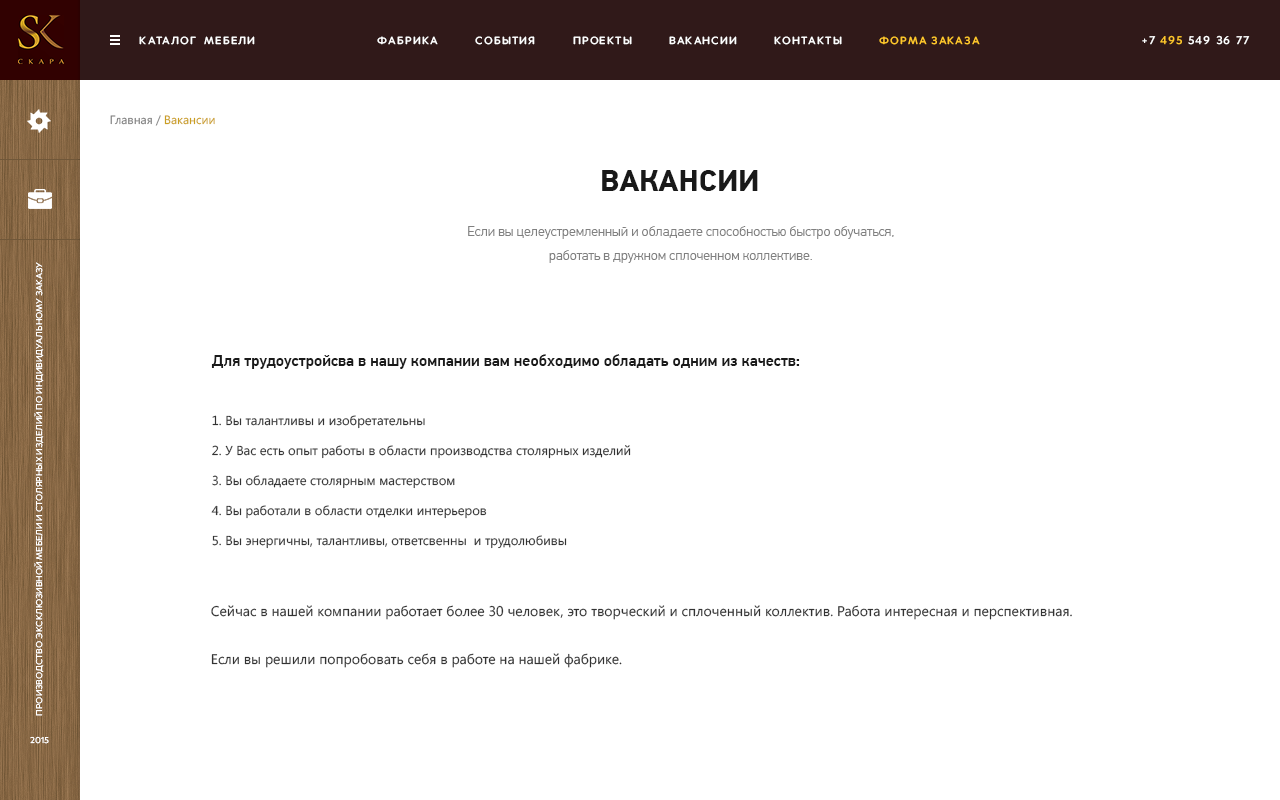
<style>
.page{position:relative;width:1280px;height:800px;background:#ffffff}
.page>*{position:absolute;margin:0}
.t1{font:11px "Merel-Medium";letter-spacing:0.1em;color:#ffffff;text-transform:uppercase}
.t2{font:11px "Merel-Medium";letter-spacing:0.1em;color:#ffc72b;text-transform:uppercase}
.t3{font:12px "Merel-Medium";letter-spacing:0.1em;color:#ffffff;text-transform:uppercase}
.t4{font:12px "Merel-Medium";letter-spacing:0.1em;color:#ffc72b;text-transform:uppercase}
.t5{font:12px "SegoeUI";color:#808080}
.t6{font:12px "SegoeUI";color:#cb9f22}
.t7{font:30px "PFDinTextPro-Bold";color:#191919;text-transform:uppercase}
.t8{font:14px/24px "PFDinTextPro-Light";color:#808080}
.t9{font:9px "Merel-Regular";color:#ffffff;text-transform:uppercase}
.t10{font:16px "PFDinTextPro-Medium";color:#1a1a1a}
.t11{font:13px/30px "SegoeUI";color:#333333}
.t12{font:14px/24px "SegoeUI";color:#333333}
</style>
<div class="page">
<p class="t1" style="left:139px;top:36px;width:116px;height:9px">каталог  мебели</p>
<p class="t1" style="left:377px;top:36px;width:603px;height:9px">фабрика          события          проекты          вакансии          контакты<span class="t2">          форма заказа</span></p>
<p class="t3" style="left:1142px;top:35px;width:108px;height:10px">+7 <span class="t4">495</span> 549 36 77</p>
<p class="t5" style="left:110px;top:115px;width:105px;height:11px">Главная / <span class="t6">Вакансии</span></p>
<p class="t7" style="left:602px;top:170px;width:156px;height:21px">Вакансии</p>
<p class="t8" style="left:468px;top:226px;width:426px;height:37px;text-align:center">Если вы целеустремленный и обладаете способностью быстро обучаться,<br>работать в дружном сплоченном коллективе.</p>
<p class="t9" style="left:34px;top:262px;width:10px;height:454px;rotate:-90deg">производство эксклюзивной мебели и столярных изделий по индивидуальному заказу</p>
<p class="t10" style="left:211px;top:354px;width:589px;height:15px">Для трудоустройсва в нашу компании вам необходимо обладать одним из качеств:</p>
<p class="t11" style="left:211px;top:415px;width:420px;height:134px">1. Вы талантливы и изобретательны<br>2. У Вас есть опыт работы в области производства столярных изделий<br>3. Вы обладаете столярным мастерством<br>4. Вы работали в области отделки интерьеров<br>5. Вы энергичны, талантливы, ответсвенны  и трудолюбивы</p>
<p class="t12" style="left:211px;top:605px;width:861px;height:63px">Сейчас в нашей компании работает более 30 человек, это творческий и сплоченный коллектив. Работа интересная и перспективная. <br><br>Если вы решили попробовать себя в работе на нашей фабрике.</p>
<p class="t9" style="left:30px;top:736px;width:19px;height:8px">2015</p>
</div>
